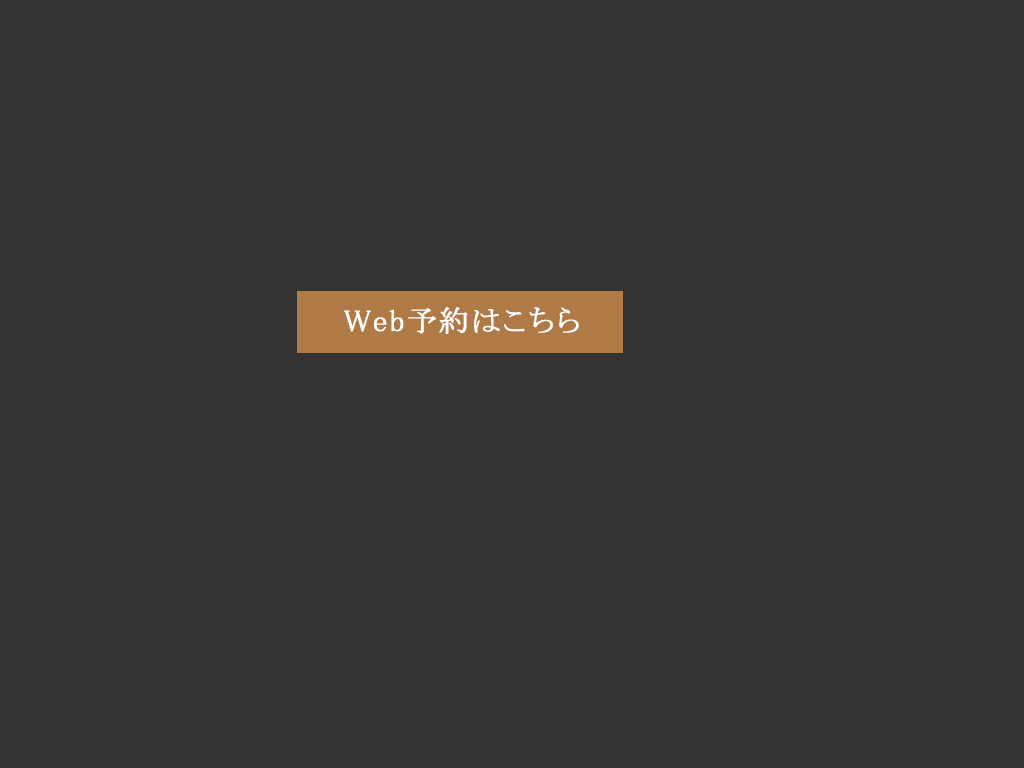
<style>
.page{position:relative;width:1024px;height:768px;background:#333333}
.page>*{position:absolute;margin:0}
.t1{font:30px "MS-PMincho";letter-spacing:0.05em;color:#ffffff;font-weight:bold}
</style>
<div class="page">
<p class="t1" style="left:344px;top:307px;width:235px;height:27px">Web予約はこちら</p>
</div>
